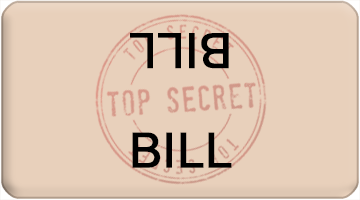
<style>
.page{position:relative;width:360px;height:200px;background:#e8d0bb}
.page>*{position:absolute;margin:0}
.t1{font:48px "ArialMT";color:#000000;font-weight:bold}
</style>
<div class="page">
<p class="t1" style="left:130px;top:33px;width:99px;height:36px;rotate:180deg">BILL</p>
<p class="t1" style="left:132px;top:132px;width:100px;height:36px">BILL</p>
</div>
